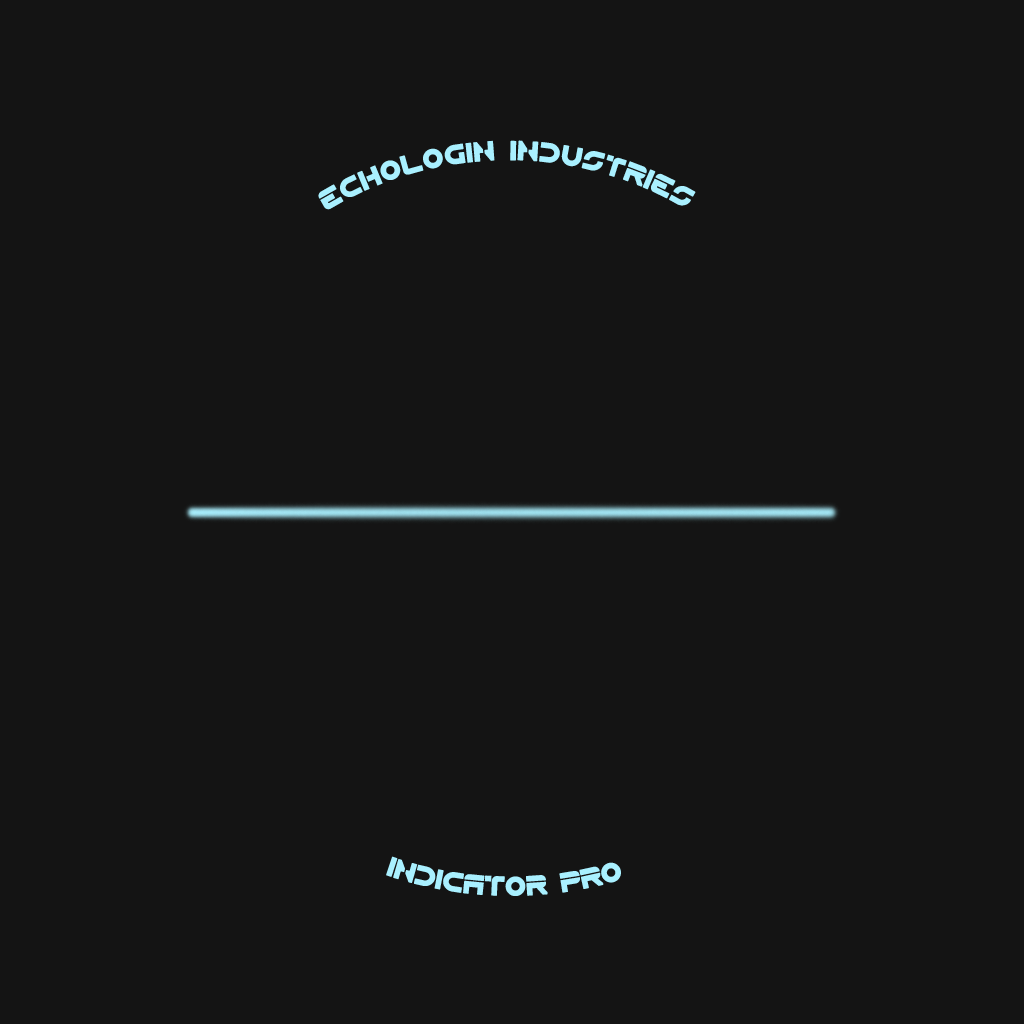
<style>
.page{position:relative;width:1024px;height:1024px;background:#141414}
.page>*{position:absolute;margin:0}
.t1{font:36px "Flynn";color:#a9f0ff}
</style>
<div class="page">
<p class="t1" style="left:318px;top:140px;width:378px;height:70px;text-align:right">echologin industries</p>
<p class="t1" style="left:386px;top:856px;width:235px;height:40px">indicator pro</p>
</div>
